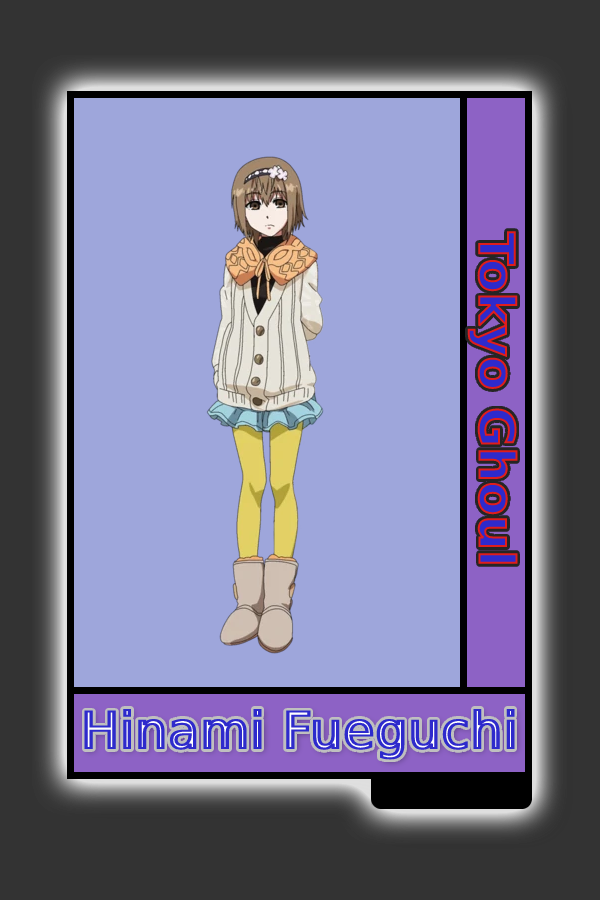
<style>
.page{position:relative;width:600px;height:900px;background:#9ea6db}
.page>*{position:absolute;margin:0}
.t1{font:48.8px "MADETOMMY-Bold"}
.t2{font:50px "CoolveticaRg-Regular";font-weight:bold}
</style>
<div class="page">
<p class="t1" style="left:467px;top:231px;width:51px;height:333px;rotate:90deg">Tokyo Ghoul</p>
<p class="t2" style="left:84px;top:709px;width:431px;height:51px">Hinami Fueguchi</p>
</div>
